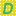
<style>
.page{position:relative;width:16px;height:16px;background:#ead518}
.page>*{position:absolute;margin:0}
.t1{font:14px "Track-Italic";color:#2bb673}
</style>
<div class="page">
<p class="t1" style="left:3px;top:3px;width:10px;height:11px">D</p>
</div>
